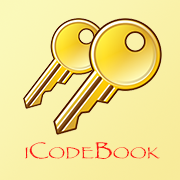
<style>
.page{position:relative;width:180px;height:180px}
.page>*{position:absolute;margin:0}
.t1{font:24px "Papyrus";color:#fc1515;font-variant:small-caps;scale:1.1 1}
</style>
<div class="page">
<p class="t1" style="left:25px;top:142px;width:135px;height:17px">iCodeBook</p>
</div>
